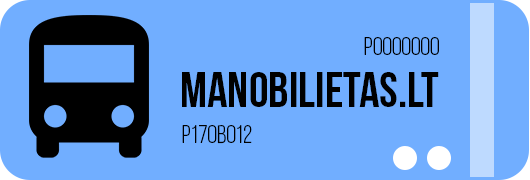
<style>
.page{position:relative;width:530px;height:180px;background:#71aeff}
.page>*{position:absolute;margin:0}
.t1{font:25px "BebasNeueBook";color:#000000}
.t2{font:50px "BebasNeueBold";color:#000000}
</style>
<div class="page">
<p class="t1" style="left:364px;top:37px;width:75px;height:18px">P0000000</p>
<p class="t2" style="left:182px;top:72px;width:257px;height:35px">MANOBILIETAS.LT</p>
<p class="t1" style="left:182px;top:125px;width:70px;height:19px">P170B012</p>
</div>
